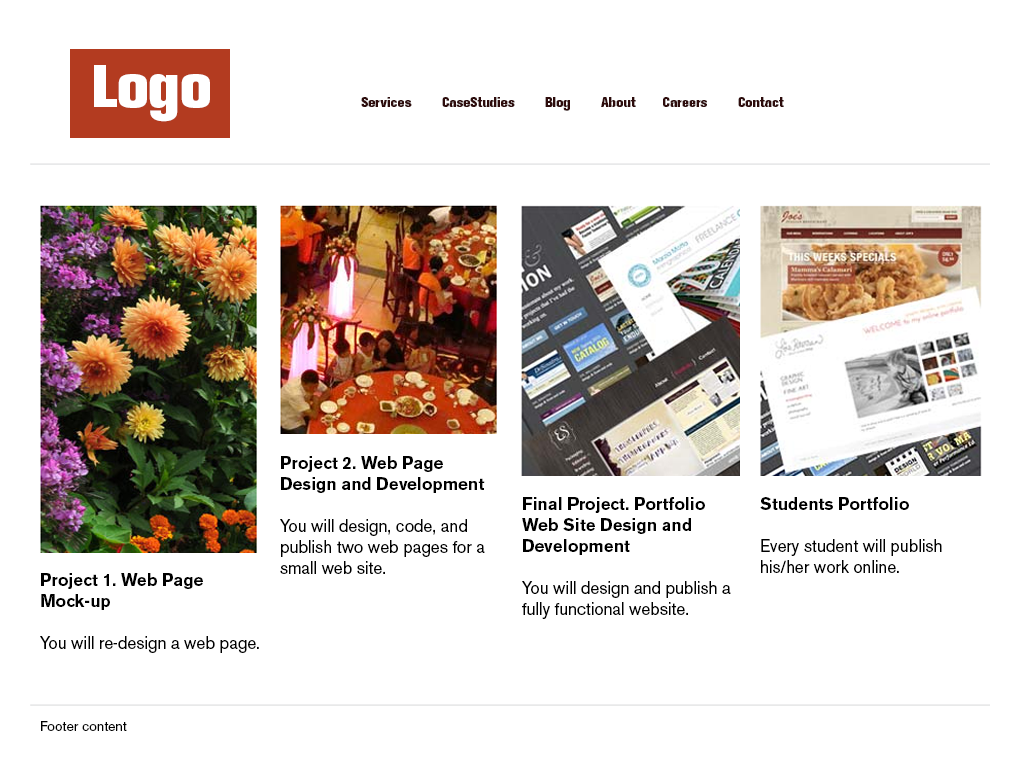
<style>
.page{position:relative;width:1020px;height:776px;background:#ffffff}
.page>*{position:absolute;margin:0}
.t1{font:60px "AkzidenzGroteskBE-XBd";color:#ffffff}
.t2{font:14px "AkzidenzGroteskBE-XBd";color:#2e0c0c}
.t3{font:17px/21px "AkzidenzGroteskBE-Regular";color:#000000}
.t4{font:17px/21px "AkzidenzGroteskBE-Bold";color:#000000}
.t5{font:14px "AkzidenzGroteskBE-Regular";color:#000000}
</style>
<div class="page">
<p class="t1" style="left:94px;top:65px;width:116px;height:57px">Logo</p>
<p class="t2" style="left:361px;top:97px;width:423px;height:14px">Services        CaseStudies        Blog        About       Careers        Contact</p>
<p class="t3" style="left:280px;top:456px;width:205px;height:118px"><span class="t4">Project 2. Web Page Design and Development   <br></span>You will design, code, and publish two web pages for a small web site.</p>
<p class="t4" style="left:522px;top:497px;width:209px;height:122px">Final Project. Portfolio Web Site Design and <br>Development<br><br><span class="t3">You will design and publish a fully functional website.</span></p>
<p class="t3" style="left:760px;top:497px;width:182px;height:76px"><span class="t4">Students Portfolio<br><br></span>Every student will publish his/her work online.</p>
<p class="t3" style="left:40px;top:573px;width:219px;height:80px"><span class="t4">Project 1. Web Page Mock-up</span> <br><br>You will re-design a web page.</p>
<p class="t5" style="left:41px;top:721px;width:86px;height:10px">Footer content</p>
</div>
